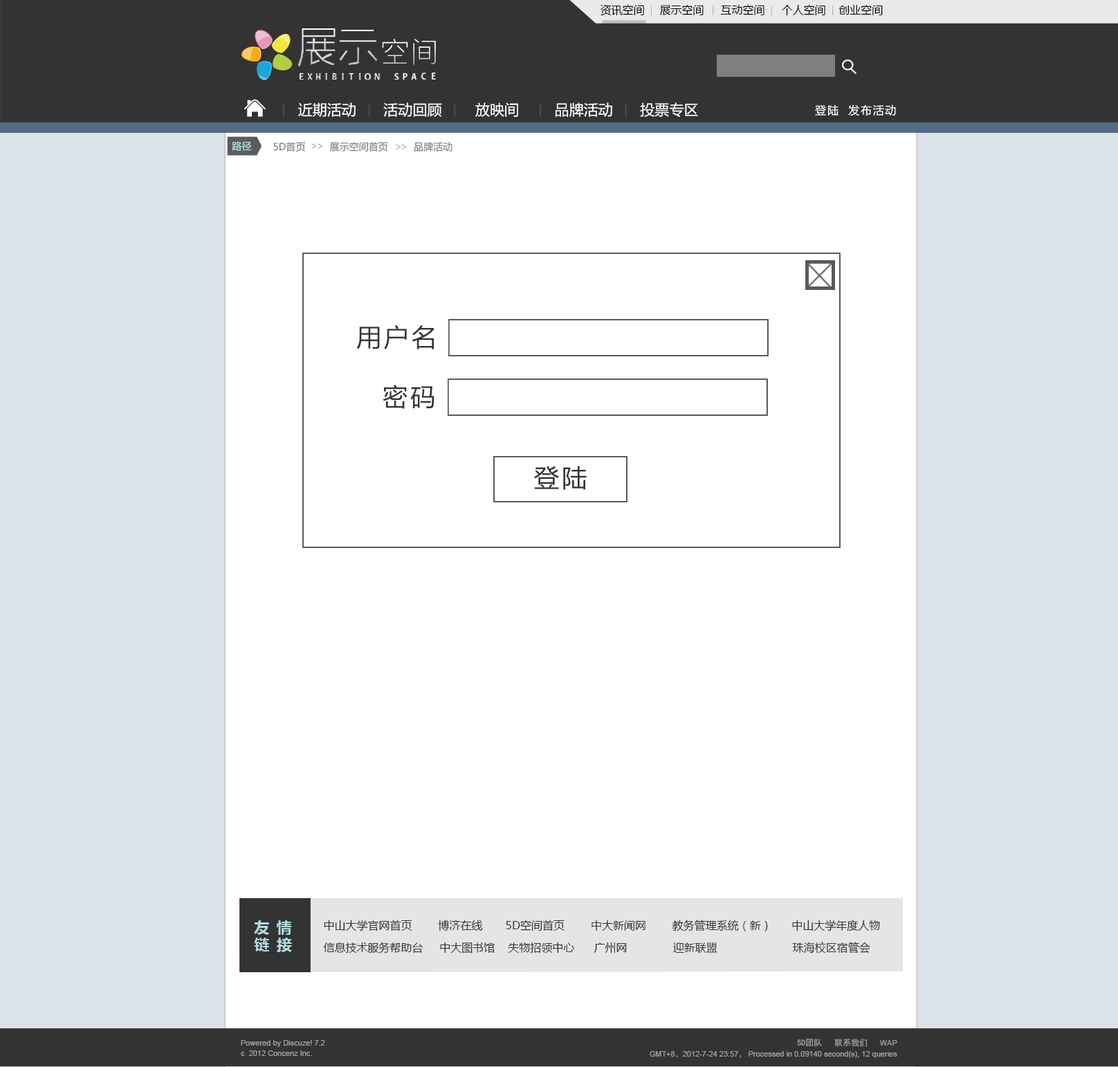
<style>
.page{position:relative;width:1118px;height:1067px;background:#ffffff}
.page>*{position:absolute;margin:0}
.t1{font:11.1px "MicrosoftYaHei";color:#0c020b}
.t2{font:14.5px "MicrosoftYaHei";color:#ffffff}
.t3{font:11.1px "MicrosoftYaHei";letter-spacing:0.1em;color:#ffffff}
.t4{font:9.7px "MicrosoftYaHei";color:#b1e8e8}
.t5{font:9.7px "MicrosoftYaHei";color:#808080}
.t6{font:9.7px "MyriadPro-Regular";color:#7fa5ba}
.t7{font:24.9px "MicrosoftYaHei";letter-spacing:0.1em;color:#333333}
.t8{font:14.5px "MicrosoftYaHei-Bold";letter-spacing:0.1em;color:#b5dbdc}
.t9{font:11.1px/22.1px "MicrosoftYaHei";color:#333333}
.t10{font:7.6px "ArialMT";color:#a3a3a3}
.t11{font:8.3px "SimHei";color:#a3a3a3}
.t12{font:7.6px "AdobeSongStd-Light";color:#a3a3a3}
</style>
<div class="page">
<p class="t1" style="left:600px;top:4px;width:44px;height:12px">资讯空间</p>
<p class="t1" style="left:660px;top:4px;width:44px;height:11px">展示空间</p>
<p class="t1" style="left:720px;top:4px;width:44px;height:11px">互动空间</p>
<p class="t1" style="left:782px;top:4px;width:43px;height:11px">个人空间</p>
<p class="t1" style="left:838px;top:4px;width:45px;height:11px">创业空间</p>
<p class="t2" style="left:298px;top:102px;width:58px;height:15px">近期活动</p>
<p class="t2" style="left:383px;top:102px;width:59px;height:15px">活动回顾</p>
<p class="t2" style="left:475px;top:102px;width:43px;height:15px">放映间</p>
<p class="t2" style="left:555px;top:102px;width:57px;height:15px">品牌活动</p>
<p class="t2" style="left:640px;top:102px;width:58px;height:15px">投票专区</p>
<p class="t3" style="left:815px;top:104px;width:81px;height:12px">登陆  发布活动</p>
<p class="t4" style="left:232px;top:141px;width:20px;height:10px">路径</p>
<p class="t5" style="left:273px;top:142px;width:33px;height:9px">5D首页</p>
<p class="t6" style="left:311px;top:143px;width:11px;height:6px">&gt;&gt;</p>
<p class="t5" style="left:329px;top:142px;width:59px;height:9px">展示空间首页</p>
<p class="t6" style="left:396px;top:144px;width:11px;height:5px">&gt;&gt;</p>
<p class="t5" style="left:414px;top:142px;width:38px;height:9px">品牌活动</p>
<p class="t7" style="left:356px;top:324px;width:78px;height:25px">用户名</p>
<p class="t7" style="left:383px;top:385px;width:51px;height:24px">密码</p>
<p class="t7" style="left:534px;top:466px;width:53px;height:24px">登陆</p>
<p class="t8" style="left:254px;top:920px;width:38px;height:32px">友 情 <br>链 接</p>
<p class="t9" style="left:323px;top:919px;width:557px;height:34px">中山大学官网首页        博济在线       5D空间首页        中大新闻网        教务管理系统（新）      中山大学年度人物 <br>信息技术服务帮助台     中大图书馆    失物招领中心      广州网              迎新联盟                       珠海校区宿管会</p>
<p class="t10" style="left:241px;top:1040px;width:84px;height:7px">Powered by Discuze! 7.2</p>
<p class="t11" style="left:797px;top:1038px;width:25px;height:9px">5D团队</p>
<p class="t11" style="left:834px;top:1038px;width:33px;height:9px">联系我们</p>
<p class="t10" style="left:879px;top:1040px;width:18px;height:5px">WAP</p>
<p class="t10" style="left:241px;top:1050px;width:71px;height:6px">c  2012 Concenz Inc.</p>
<p class="t10" style="left:650px;top:1051px;width:247px;height:7px">GMT+8<span class="t12">，</span>2012-7-24 23:57<span class="t12">，</span> Processed in 0.09140 second(s), 12 queries</p>
</div>
